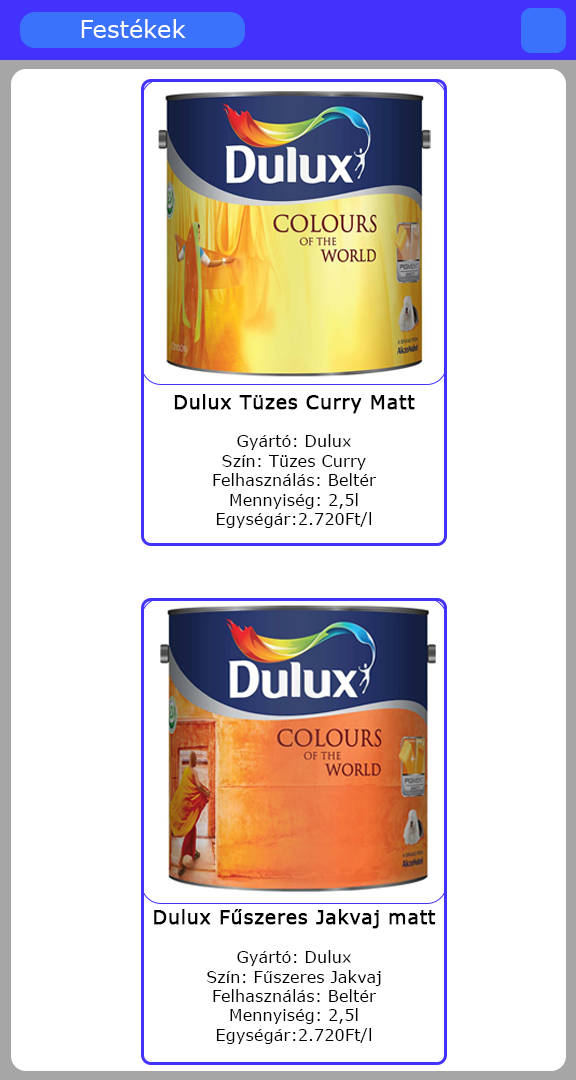
<style>
.page{position:relative;width:576px;height:1080px;background:#ffffff}
.page>*{position:absolute;margin:0}
.t1{font:24px "Verdana";color:#ffffff}
.t2{font:16.2px "Verdana";color:#010000}
.t3{font:19.4px "Verdana";color:#010000;font-weight:bold}
</style>
<div class="page">
<p class="t1" style="left:81px;top:19px;width:105px;height:19px">Festékek</p>
<p class="t2" style="left:174px;top:394px;width:241px;height:134px;text-align:center"><span class="t3">Dulux Tüzes Curry Matt<br></span><br>Gyártó: Dulux<br>Szín: Tüzes Curry<br>Felhasználás: Beltér<br>Mennyiség: 2,5l<br>Egységár:2.720Ft/l</p>
<p class="t2" style="left:154px;top:909px;width:282px;height:135px;text-align:center"><span class="t3">Dulux Fűszeres Jakvaj matt<br></span><br>Gyártó: Dulux<br>Szín: Fűszeres Jakvaj<br>Felhasználás: Beltér<br>Mennyiség: 2,5l<br>Egységár:2.720Ft/l</p>
</div>
